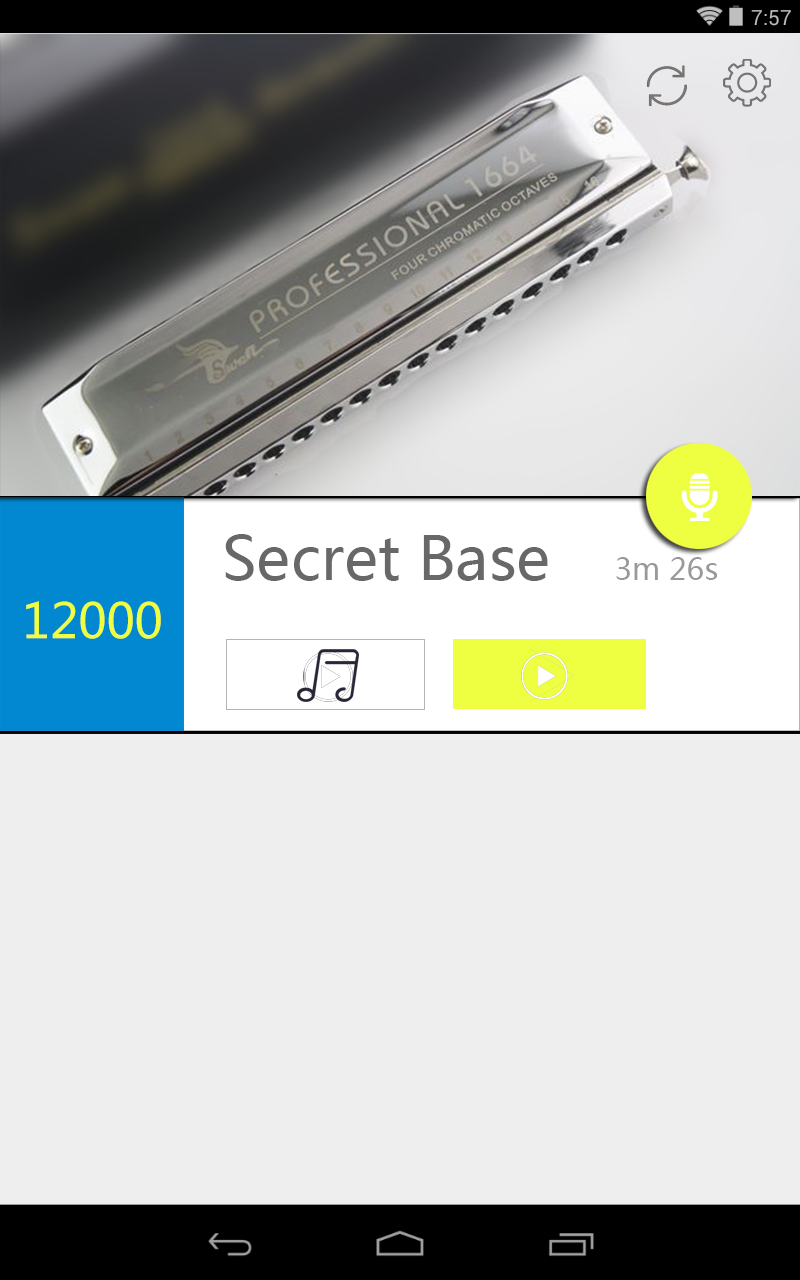
<style>
.page{position:relative;width:800px;height:1280px;background:#eeeeee}
.page>*{position:absolute;margin:0}
.t1{font:60px "MicrosoftYaHei";color:#686868}
.t2{font:30px "MicrosoftYaHei";color:#999999}
.t3{font:48px "MicrosoftYaHei";color:#eeff41}
</style>
<div class="page">
<p class="t1" style="left:225px;top:534px;width:323px;height:47px">Secret Base</p>
<p class="t2" style="left:616px;top:557px;width:102px;height:23px">3m 26s</p>
<p class="t3" style="left:26px;top:601px;width:135px;height:38px">12000</p>
</div>
